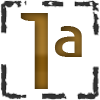
<style>
.page{position:relative;width:100px;height:100px;background:#ffffff}
.page>*{position:absolute;margin:0}
.t1{font:96.8px "Ageonebold"}
</style>
<div class="page">
<p class="t1" style="left:20px;top:13px;width:62px;height:76px">1a</p>
</div>
